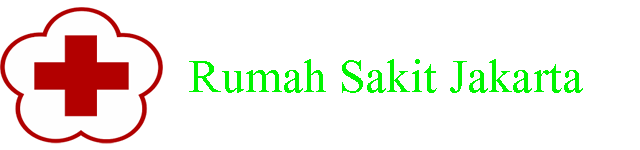
<style>
.page{position:relative;width:640px;height:150px;background:#ffffff}
.page>*{position:absolute;margin:0}
.t1{font:72px "AngsanaNew";color:#00f500}
</style>
<div class="page">
<p class="t1" style="left:189px;top:59px;width:394px;height:34px">Rumah Sakit Jakarta</p>
</div>
